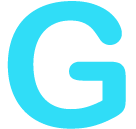
<style>
.page{position:relative;width:136px;height:129px;background:#ffffff}
.page>*{position:absolute;margin:0}
.t1{font:172.1px "ArialRoundedMTBold";color:#30ddf7}
</style>
<div class="page">
<p class="t1" style="left:7px;top:1px;width:119px;height:128px">G</p>
</div>
